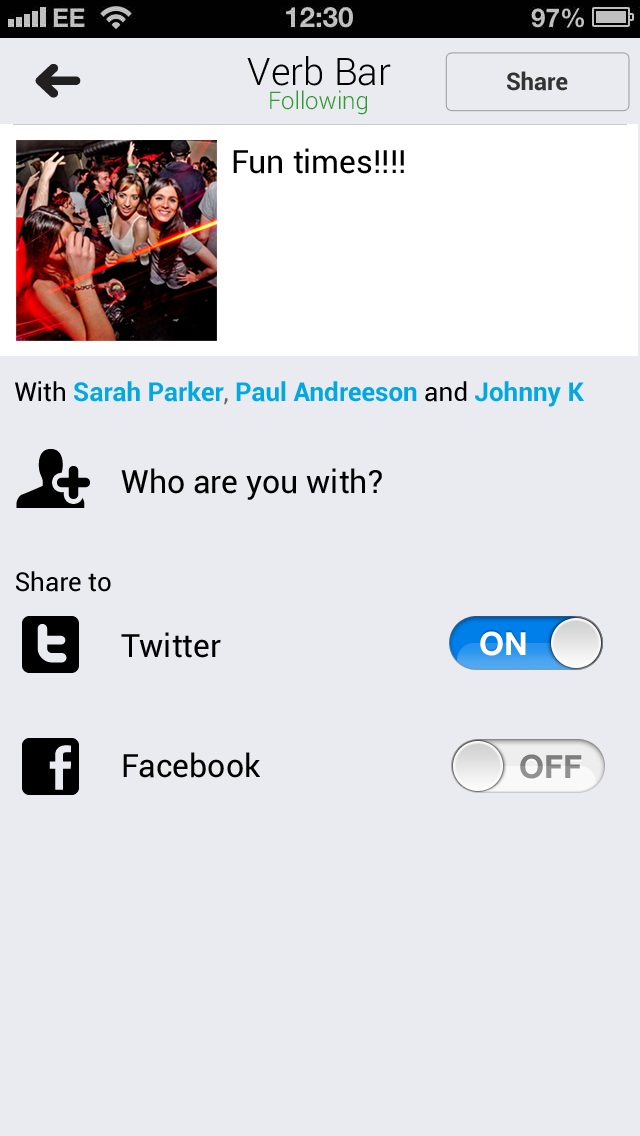
<style>
.page{position:relative;width:640px;height:1136px;background:#e9ebf0}
.page>*{position:absolute;margin:0}
.t1{font:38px "Roboto-Light";color:#000000}
.t2{font:24px "Roboto-Bold";color:#333333}
.t3{font:24px "Roboto-Light";color:#339933}
.t4{font:32px "Roboto-Regular";color:#000000}
.t5{font:26px "Roboto-Bold";color:#02a8df}
.t6{font:26px "Roboto-Regular";color:#000000}
.t7{font:26px "Roboto-Regular";color:#666666}
.t8{font:32px "HelveticaNeue-Bold";color:#ffffff}
.t9{font:32px "HelveticaNeue-Bold";color:#7f7f7f}
</style>
<div class="page">
<p class="t1" style="left:247px;top:56px;width:144px;height:30px">Verb Bar</p>
<p class="t2" style="left:507px;top:71px;width:61px;height:20px">Share</p>
<p class="t3" style="left:270px;top:90px;width:97px;height:25px">Following</p>
<p class="t4" style="left:233px;top:148px;width:171px;height:26px">Fun times!!!!</p>
<p class="t5" style="left:15px;top:381px;width:569px;height:26px"><span class="t6">With </span>Sarah Parker<span class="t7">, </span>Paul Andreeson <span class="t6">and </span>Johnny K</p>
<p class="t4" style="left:121px;top:468px;width:261px;height:32px">Who are you with?</p>
<p class="t6" style="left:16px;top:571px;width:95px;height:21px">Share to</p>
<p class="t4" style="left:121px;top:632px;width:100px;height:26px">Twitter</p>
<p class="t8" style="left:480px;top:631px;width:46px;height:25px">ON</p>
<p class="t4" style="left:123px;top:752px;width:137px;height:26px">Facebook</p>
<p class="t9" style="left:520px;top:754px;width:62px;height:25px">OFF</p>
</div>
